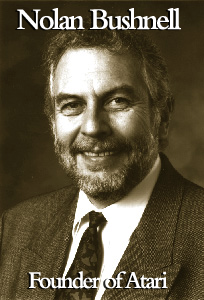
<style>
.page{position:relative;width:204px;height:300px}
.page>*{position:absolute;margin:0}
.t1{font:31.2px "BemboMT-SemiBold";letter-spacing:-0.08em;color:#ffffff;scale:0.95 1}
.t2{font:25px "BemboMT-SemiBold";letter-spacing:-0.08em;color:#ffffff;scale:0.95 1}
</style>
<div class="page">
<p class="t1" style="left:17px;top:8px;width:164px;height:22px">Nolan Bushnell</p>
<p class="t2" style="left:29px;top:271px;width:139px;height:18px">Founder of Atari</p>
</div>
